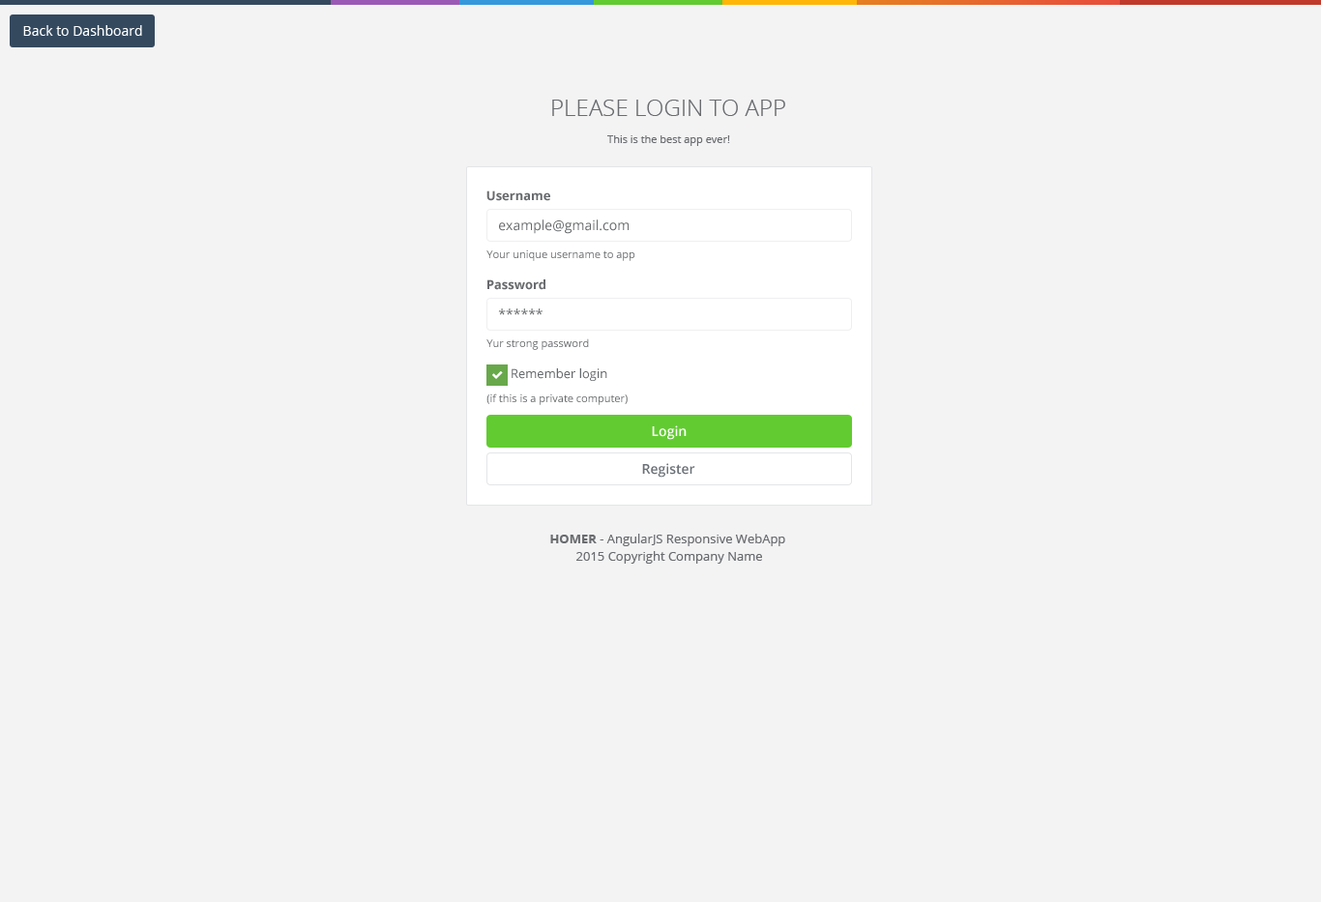
<style>
.page{position:relative;width:1321px;height:902px;background:#f3f3f4}
.page>*{position:absolute;margin:0}
.t1{font:13.5px "OpenSans";color:#ffffff}
.t2{font:23.2px "OpenSans-Light";color:#6a6c6f}
.t3{font:10.6px "OpenSans";color:#6a6c6f}
.t4{font:12.6px "OpenSans-Bold";color:#676a6c}
.t5{font:13.5px "OpenSans";color:#676a6c}
.t6{font:10.6px "OpenSans";color:#676a6c}
.t7{font:12.6px "OpenSans";color:#676a6c}
.t8{font:13.5px "OpenSans-Semibold";color:#ffffff}
.t9{font:13.5px "OpenSans-Semibold";color:#6b7178}
.t10{font:12.6px/17.4px "OpenSans";color:#6a6c6f}
.t11{font:12.6px/17.4px "OpenSans-Bold";color:#6a6c6f}
</style>
<div class="page">
<p class="t1" style="left:23px;top:25px;width:119px;height:11px">Back to Dashboard</p>
<p class="t2" style="left:552px;top:100px;width:233px;height:16px">PLEASE LOGIN TO APP</p>
<p class="t3" style="left:607px;top:135px;width:123px;height:11px">This is the best app ever!</p>
<p class="t4" style="left:487px;top:191px;width:63px;height:10px">Username</p>
<p class="t5" style="left:499px;top:220px;width:130px;height:14px">example@gmail.com</p>
<p class="t6" style="left:487px;top:250px;width:149px;height:11px">Your unique username to app</p>
<p class="t4" style="left:488px;top:280px;width:58px;height:10px">Password</p>
<p class="t5" style="left:498px;top:309px;width:45px;height:6px">******</p>
<p class="t6" style="left:487px;top:339px;width:102px;height:11px">Yur strong password</p>
<p class="t7" style="left:512px;top:369px;width:95px;height:12px">Remember login</p>
<p class="t6" style="left:487px;top:394px;width:141px;height:11px">(if this is a private computer)</p>
<p class="t8" style="left:652px;top:426px;width:35px;height:14px">Login</p>
<p class="t9" style="left:642px;top:463px;width:53px;height:15px">Register</p>
<p class="t10" style="left:550px;top:534px;width:235px;height:30px;text-align:center"><span class="t11">HOMER</span> - AngularJS Responsive WebApp <br>2015 Copyright Company Name</p>
</div>
